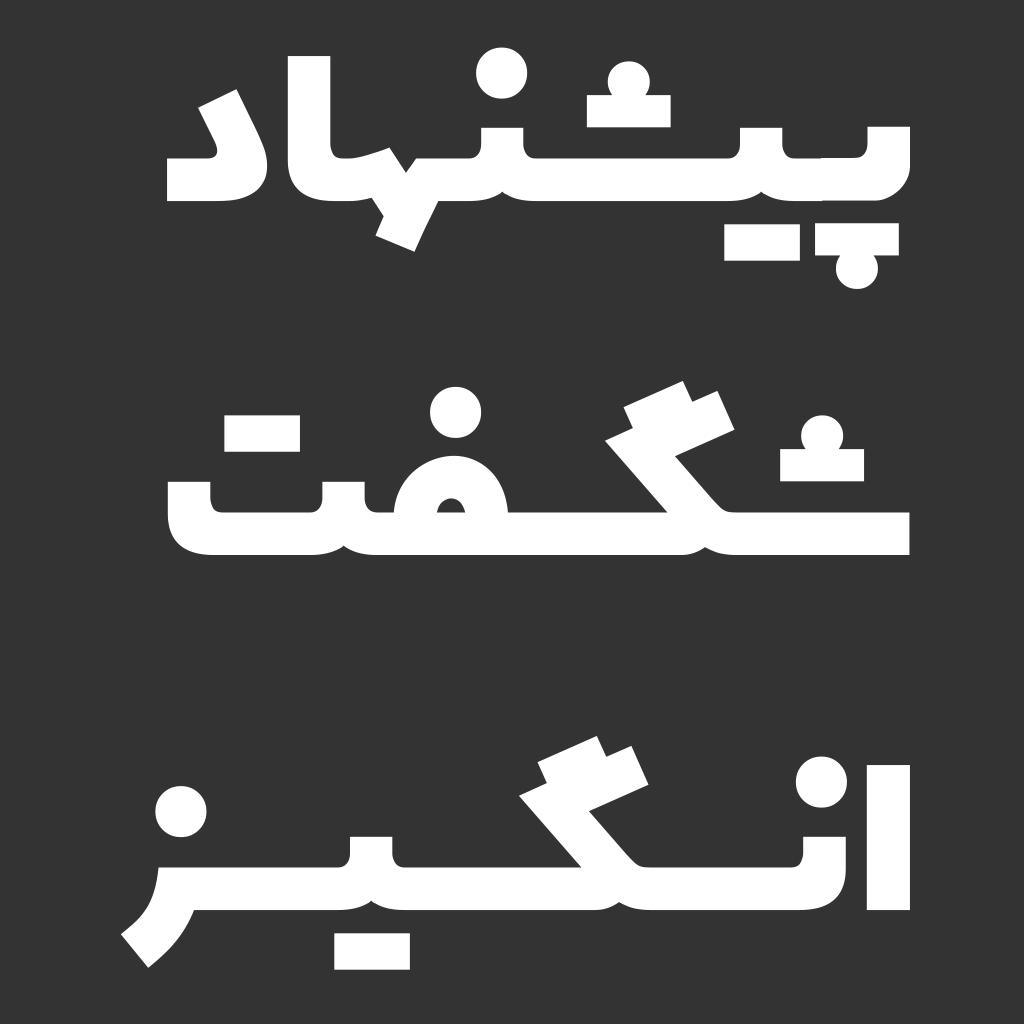
<style>
.page{position:relative;width:1024px;height:1024px;background:#333333}
.page>*{position:absolute;margin:0}
.t1{font:295.4px "Cinema";color:#ffffff}
</style>
<div class="page">
<p class="t1" style="left:120px;top:47px;width:790px;height:923px;text-align:right">پیشنهاد<br>شگـــفت<br>انــــگـــیــــز</p>
</div>
